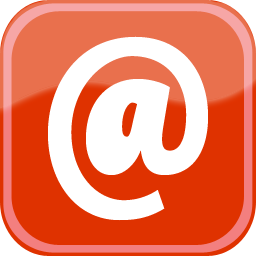
<style>
.page{position:relative;width:256px;height:256px;background:#df3200}
.page>*{position:absolute;margin:0}
.t1{font:240px "PoplarStd";color:#ffffff}
</style>
<div class="page">
<p class="t1" style="left:48px;top:36px;width:160px;height:185px">@</p>
</div>
